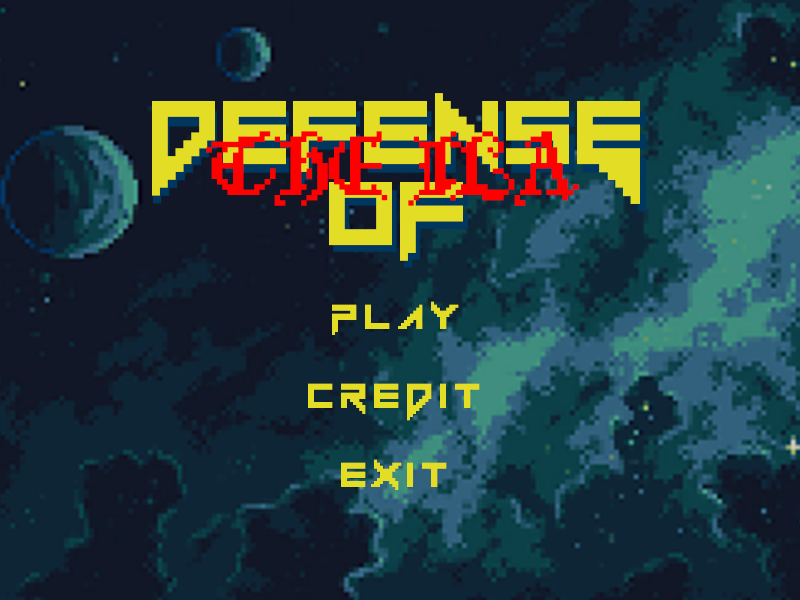
<style>
.page{position:relative;width:800px;height:600px;background:#111726}
.page>*{position:absolute;margin:0}
.t1{font:125.9px "Vermin-Vibes-1989";color:#e4dd26}
.t2{font:85.1px "Bitmgothic";color:#fe0000}
.t3{font:48.5px/78.8px "Vermin-Vibes-1989";letter-spacing:0.12em;color:#e4dd26}
</style>
<div class="page">
<p class="t1" style="left:152px;top:93px;width:488px;height:103px">DEFENSE</p>
<p class="t2" style="left:206px;top:131px;width:373px;height:75px">THE ILA</p>
<p class="t1" style="left:329px;top:182px;width:134px;height:79px">OF</p>
<p class="t3" style="left:308px;top:301px;width:172px;height:189px;text-align:center">PLAY<br>CREDIT<br>Exit</p>
</div>
